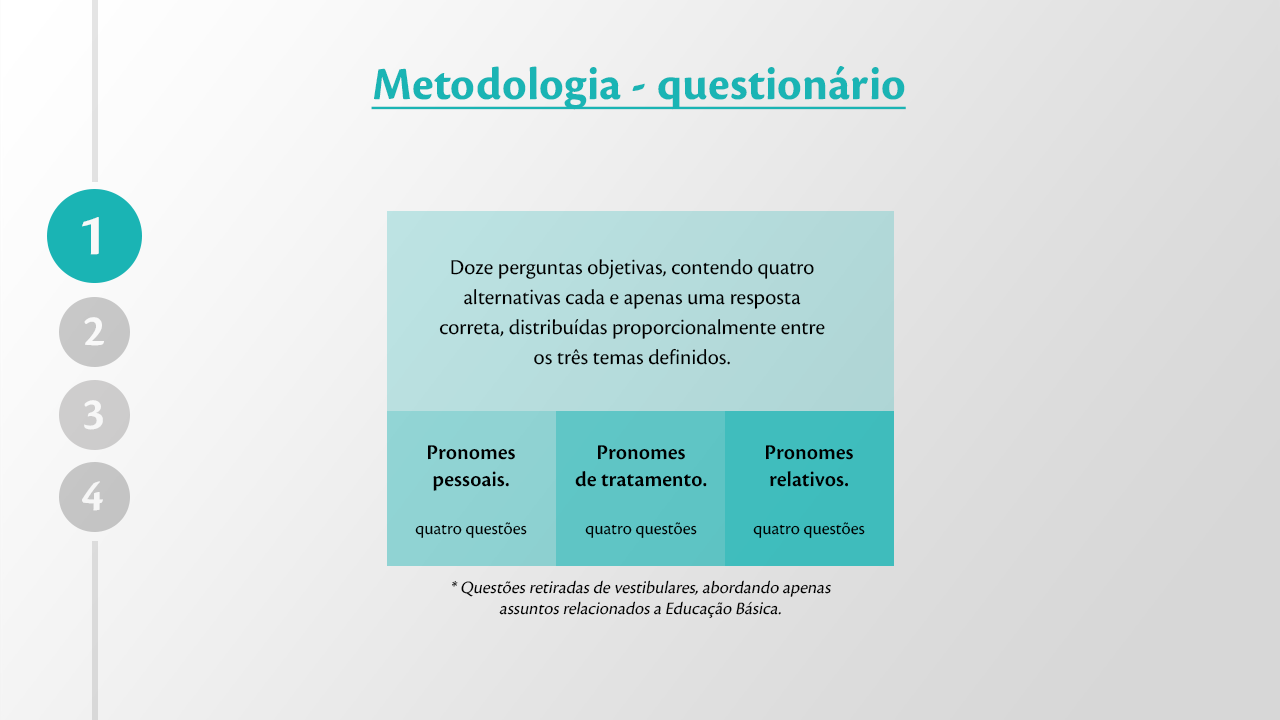
<style>
.page{position:relative;width:1280px;height:720px}
.page>*{position:absolute;margin:0}
.t1{font:48px "CronosPro-Bold";color:#1ab4b4;text-decoration:underline}
.t2{font:61.6px "CronosPro-Semibold";color:#f8f8f8}
.t3{font:22px/30px "CronosPro-Regular";color:#000000}
.t4{font:46px "CronosPro-Semibold";color:#f8f8f8}
.t5{font:22px "CronosPro-Semibold";color:#000000}
.t6{font:18px "CronosPro-Regular";color:#000000}
.t7{font:18px "CronosPro-Regular";color:#000000;font-style:italic}
</style>
<div class="page">
<p class="t1" style="left:371px;top:66px;width:535px;height:44px">Metodologia - questionário</p>
<p class="t2" style="left:82px;top:217px;width:17px;height:38px">1</p>
<p class="t3" style="left:439px;top:259px;width:386px;height:106px;text-align:center">Doze perguntas objetivas, contendo quatro alternativas cada e apenas uma resposta correta, distribuídas proporcionalmente entre os três temas definidos.</p>
<p class="t4" style="left:84px;top:317px;width:20px;height:29px">2</p>
<p class="t4" style="left:84px;top:400px;width:19px;height:30px">3</p>
<p class="t5" style="left:415px;top:445px;width:112px;height:93px;text-align:center">Pronomes<br>pessoais.<br><br><span class="t6">quatro questões</span></p>
<p class="t5" style="left:575px;top:445px;width:132px;height:93px;text-align:center">Pronomes<br>de tratamento.<br><br><span class="t6">quatro questões</span></p>
<p class="t5" style="left:753px;top:445px;width:112px;height:93px;text-align:center">Pronomes<br>relativos.<br><br><span class="t6">quatro questões</span></p>
<p class="t4" style="left:82px;top:481px;width:21px;height:30px">4</p>
<p class="t7" style="left:452px;top:580px;width:379px;height:38px;text-align:center">* Questões retiradas de vestibulares, abordando apenas assuntos relacionados a Educação Básica.</p>
</div>
